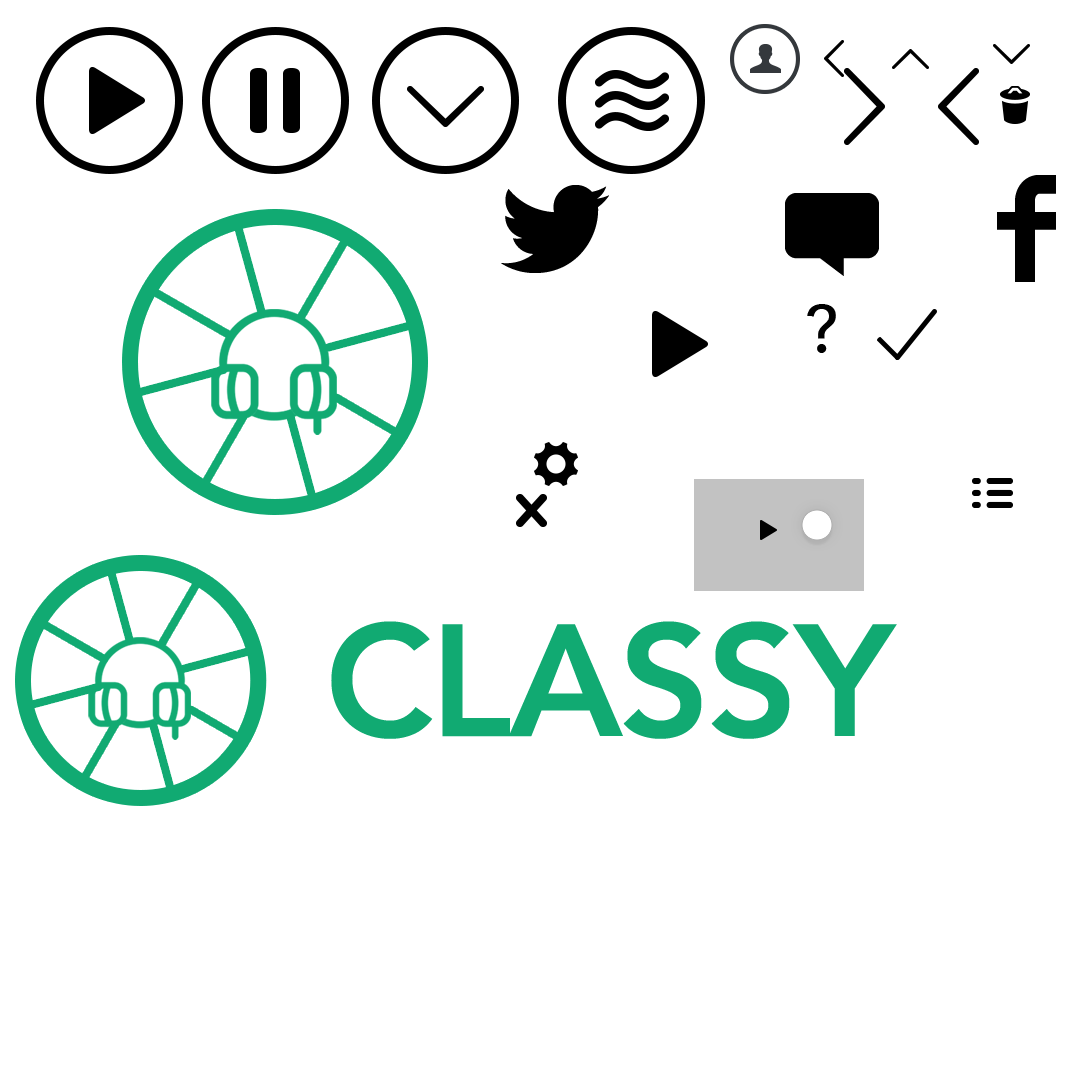
<style>
.page{position:relative;width:1080px;height:1080px;background:#ffffff}
.page>*{position:absolute;margin:0}
.t1{font:67.9px "AvenirNext-Medium";color:#000000}
.t2{font:157.7px "Avenir-Heavy";letter-spacing:-0.02em;color:#11aa72}
</style>
<div class="page">
<p class="t1" style="left:807px;top:304px;width:29px;height:49px">?</p>
<p class="t2" style="left:331px;top:621px;width:566px;height:118px">CLASSY</p>
</div>
